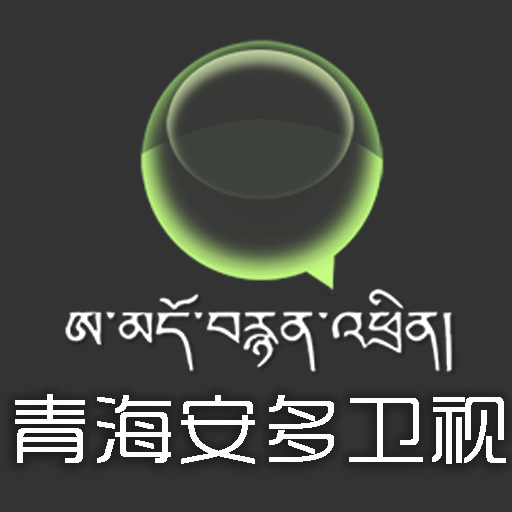
<style>
.page{position:relative;width:512px;height:512px;background:#333333}
.page>*{position:absolute;margin:0}
.t1{font:80px "SJshishang-Regular";letter-spacing:0.02em;color:#fcfdfd;font-weight:bold}
</style>
<div class="page">
<p class="t1" style="left:15px;top:394px;width:491px;height:70px">青海安多卫视</p>
</div>
